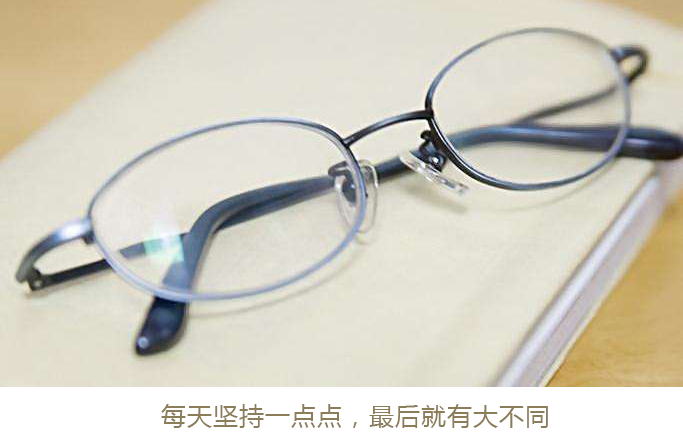
<style>
.page{position:relative;width:683px;height:444px}
.page>*{position:absolute;margin:0}
.t1{font:25px "MicrosoftYaHei";letter-spacing:0.04em;color:#8b7c5a}
</style>
<div class="page">
<p class="t1" style="left:161px;top:404px;width:387px;height:24px">每天坚持一点点，最后就有大不同</p>
</div>
